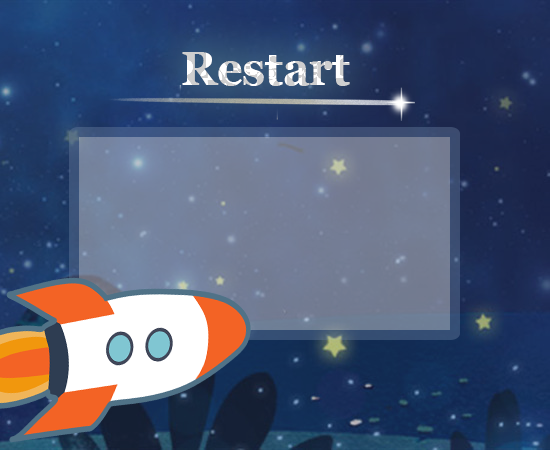
<style>
.page{position:relative;width:550px;height:450px}
.page>*{position:absolute;margin:0}
.t1{font:22.5px "Georgia-Bold";scale:0.95 1}
</style>
<div class="page">
<p class="t1" style="left:182px;top:52px;width:168px;height:34px">Restart</p>
</div>
